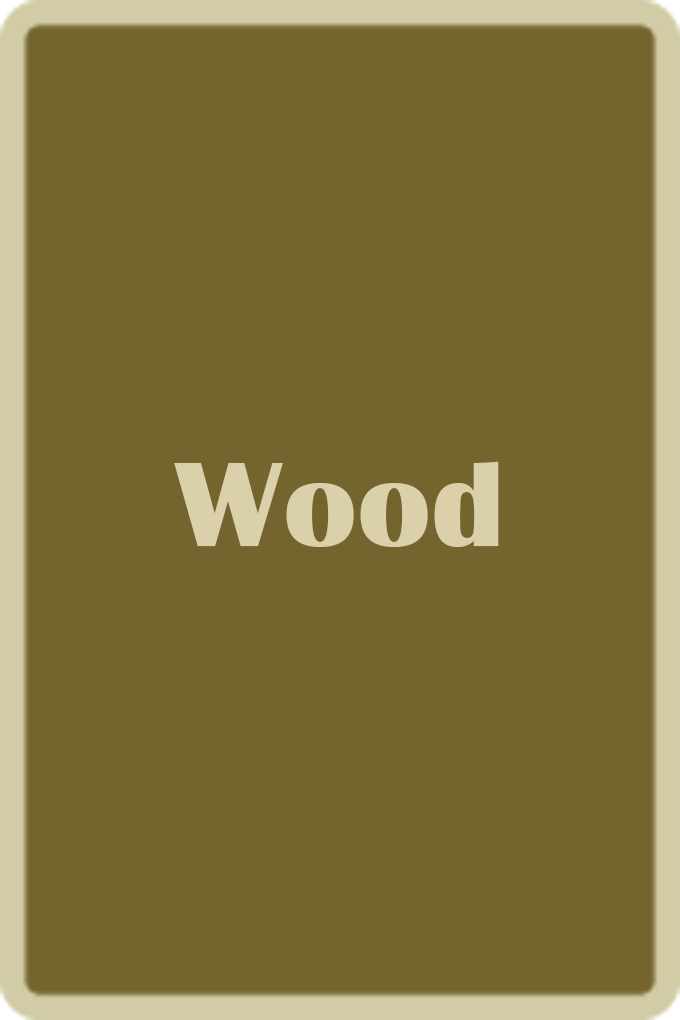
<style>
.page{position:relative;width:680px;height:1020px;background:#74652f}
.page>*{position:absolute;margin:0}
.t1{font:123.8px "BritannicBold";color:#dad0aa;scale:1.11 1}
</style>
<div class="page">
<p class="t1" style="left:174px;top:461px;width:325px;height:86px">Wood</p>
</div>
